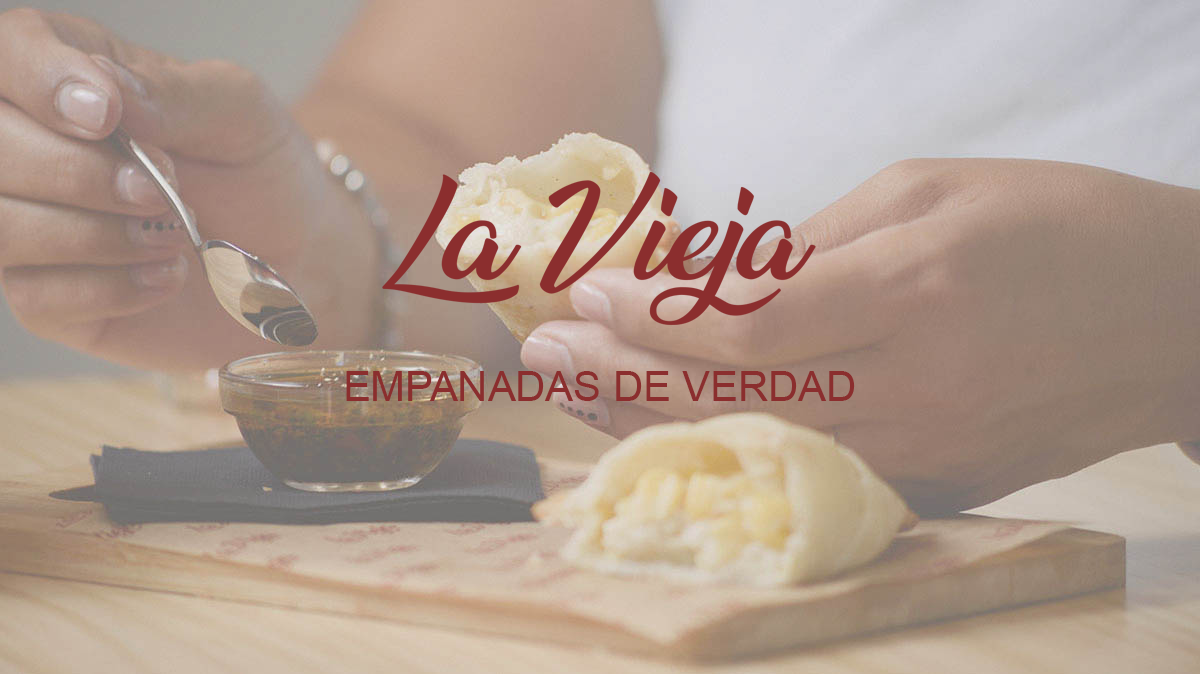
<style>
.page{position:relative;width:1200px;height:674px}
.page>*{position:absolute;margin:0}
.t1{font:41.7px "ArialMT";color:#8b2e2e}
</style>
<div class="page">
<p class="t1" style="left:346px;top:371px;width:509px;height:30px">EMPANADAS DE VERDAD</p>
</div>
